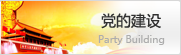
<style>
.page{position:relative;width:181px;height:55px}
.page>*{position:absolute;margin:0}
.t1{font:15px "MicrosoftYaHei";color:#313131}
.t2{font:10px "MicrosoftYaHei";color:#adadad}
</style>
<div class="page">
<p class="t1" style="left:101px;top:13px;width:60px;height:16px">党的建设</p>
<p class="t2" style="left:98px;top:35px;width:67px;height:10px">Party Building</p>
</div>
